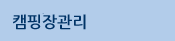
<style>
.page{position:relative;width:175px;height:41px;background:#b2ccea}
.page>*{position:absolute;margin:0}
.t1{font:16px "NanumGothicBold";color:#003366}
</style>
<div class="page">
<p class="t1" style="left:13px;top:14px;width:73px;height:16px">캠핑장관리</p>
</div>
